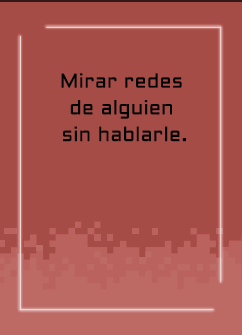
<style>
.page{position:relative;width:242px;height:335px;background:#a54c47}
.page>*{position:absolute;margin:0}
.t1{font:20px/26.7px "Aldrich-Regular";letter-spacing:0.015em;color:#000000}
</style>
<div class="page">
<p class="t1" style="left:61px;top:73px;width:125px;height:69px;text-align:center">Mirar redes <br>de alguien <br>sin hablarle.</p>
</div>
